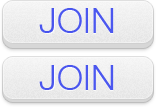
<style>
.page{position:relative;width:156px;height:110px}
.page>*{position:absolute;margin:0}
.t1{font:35px "HelveticaNeue-Light";color:#4b57ef}
</style>
<div class="page">
<p class="t1" style="left:39px;top:8px;width:75px;height:25px">JOIN</p>
<p class="t1" style="left:40px;top:9px;width:74px;height:25px">JOIN</p>
<p class="t1" style="left:39px;top:65px;width:75px;height:25px">JOIN</p>
<p class="t1" style="left:40px;top:66px;width:74px;height:25px">JOIN</p>
</div>
